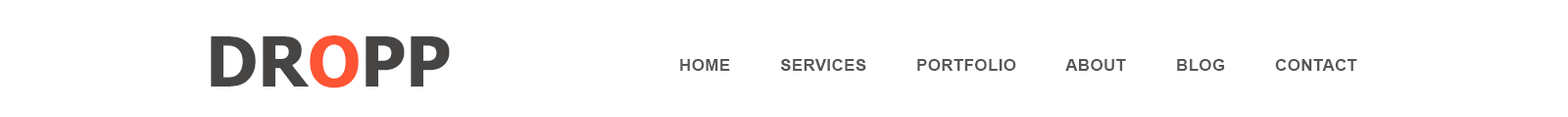
<style>
.page{position:relative;width:1568px;height:117px;background:#ffffff}
.page>*{position:absolute;margin:0}
.t1{font:68.6px "Tahoma-Bold";color:#474444;text-transform:uppercase}
.t2{font:68.6px "Tahoma-Bold";color:#fd5433;text-transform:uppercase}
.t3{font:16.7px "Arial-BoldMT";letter-spacing:0.02em;color:#565656}
</style>
<div class="page">
<p class="t1" style="left:211px;top:35px;width:239px;height:53px">Dr<span class="t2">o</span>pp</p>
<p class="t3" style="left:680px;top:59px;width:677px;height:12px">HOME          SERVICES          PORTFOLIO          ABOUT          BLOG          CONTACT</p>
</div>
